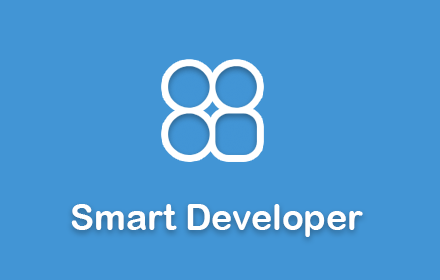
<style>
.page{position:relative;width:440px;height:280px;background:#4295d5}
.page>*{position:absolute;margin:0}
.t1{font:35.9px "ArialRoundedMTBold";color:#ffffff}
</style>
<div class="page">
<p class="t1" style="left:71px;top:204px;width:292px;height:33px">Smart Developer</p>
</div>
